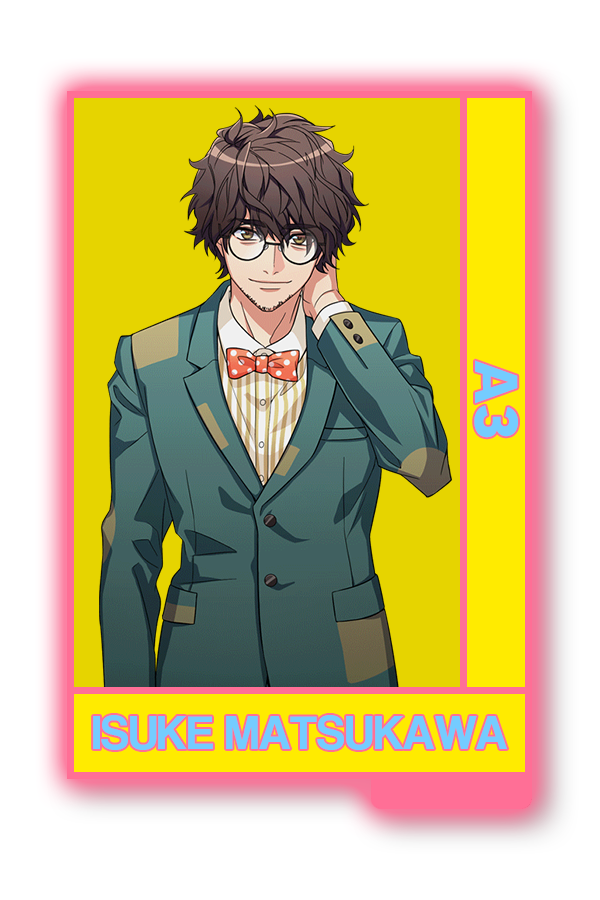
<style>
.page{position:relative;width:600px;height:900px;background:#ffffff}
.page>*{position:absolute;margin:0}
.t1{font:60.5px "MADETOMMY-Bold";color:#74ccff}
.t2{font:48.9px "CoolveticaRg-Regular";color:#74ccff}
</style>
<div class="page">
<p class="t1" style="left:474px;top:360px;width:44px;height:78px;rotate:90deg">A3</p>
<p class="t2" style="left:93px;top:715px;width:415px;height:35px">ISUKE MATSUKAWA</p>
</div>
